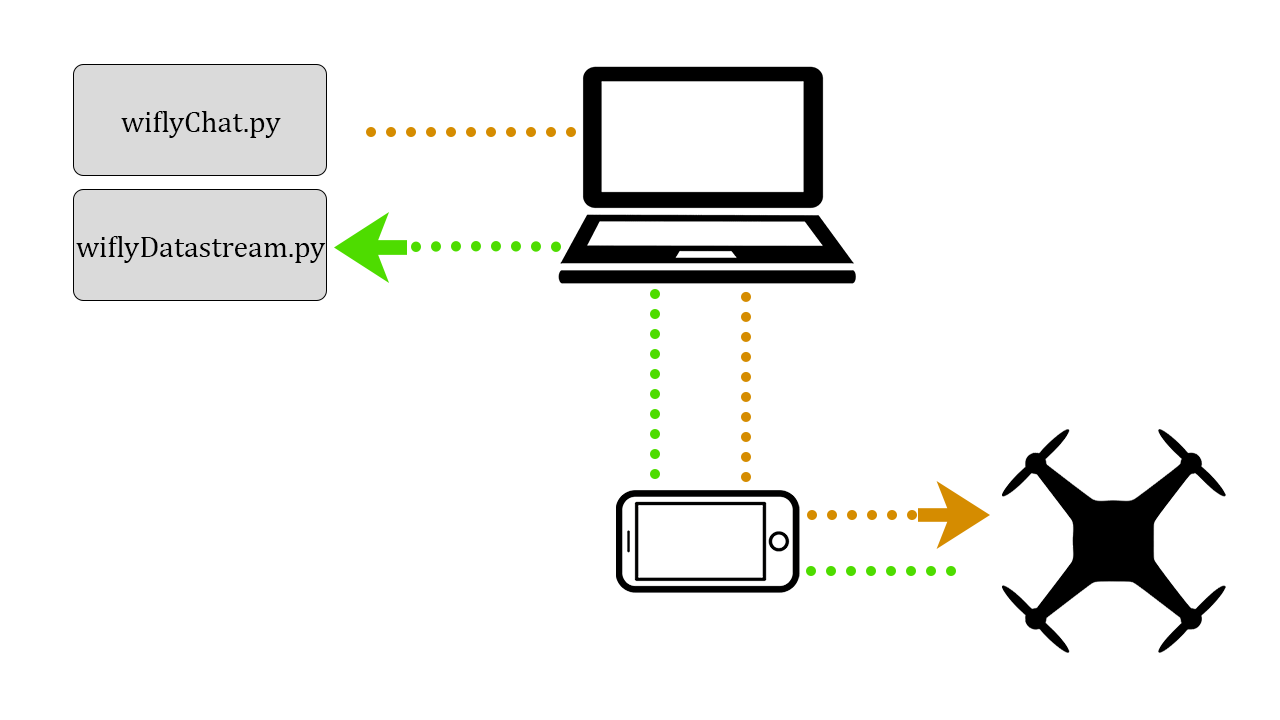
<style>
.page{position:relative;width:1280px;height:720px;background:#ffffff}
.page>*{position:absolute;margin:0}
.t1{font:30px "Cambria";color:#000000}
</style>
<div class="page">
<p class="t1" style="left:121px;top:111px;width:160px;height:27px">wiflyChat.py</p>
<p class="t1" style="left:76px;top:236px;width:250px;height:27px">wiflyDatastream.py</p>
</div>
